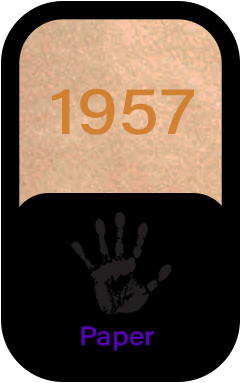
<style>
.page{position:relative;width:241px;height:383px;background:#000000}
.page>*{position:absolute;margin:0}
.t1{font:67.5px "AcuminConcept-Medium";color:#d18132;scale:1.11 1}
.t2{font:26.3px "AcuminConcept-Medium";color:#5800b3;scale:1.11 1}
</style>
<div class="page">
<p class="t1" style="left:52px;top:88px;width:143px;height:47px">1957</p>
<p class="t2" style="left:81px;top:326px;width:74px;height:25px">Paper</p>
</div>
